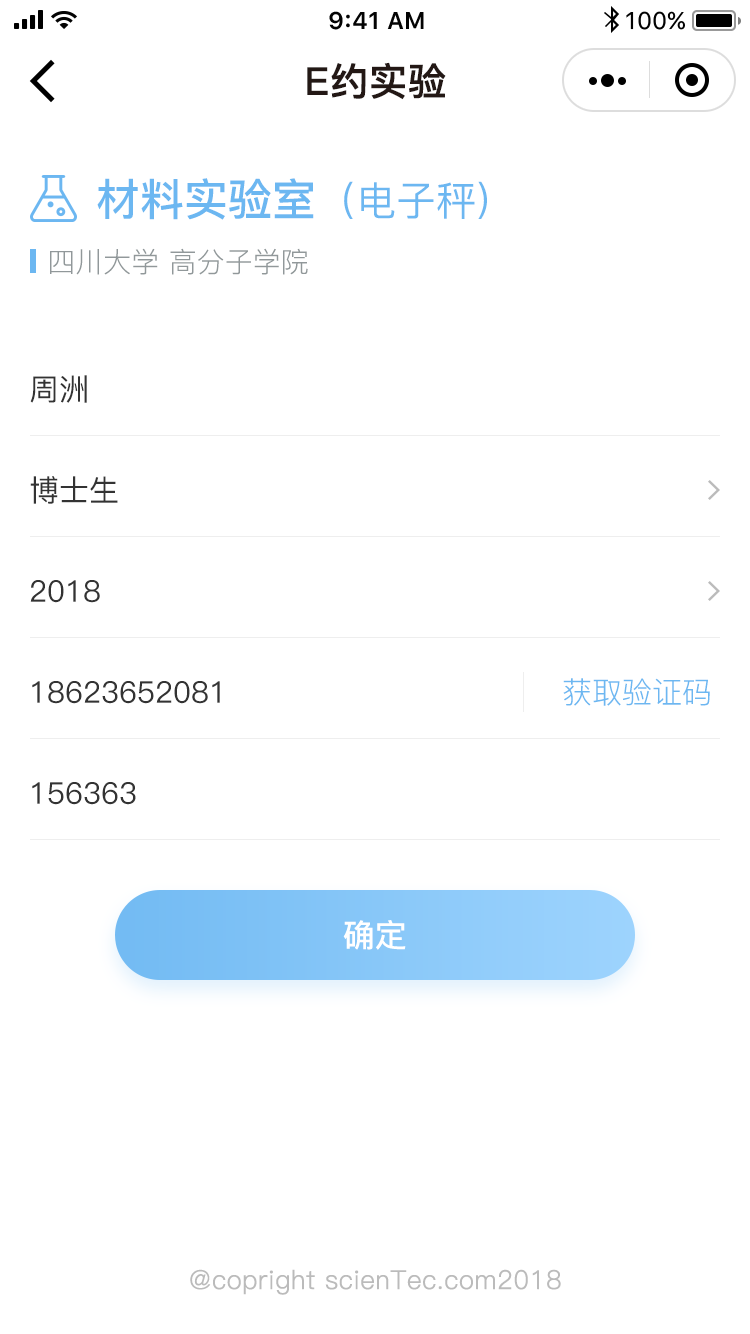
<style>
.page{position:relative;width:750px;height:1334px;background:#ffffff}
.page>*{position:absolute;margin:0}
.t1{font:38px "PingFang-SC-Bold";color:#231815;font-weight:bold}
.t2{font:44px "PingFang-SC-Bold";color:#6cb7f1}
.t3{font:40px "PingFang-SC-Medium";color:#6cb7f1}
.t4{font:28px "PingFang-SC-Regular";color:#91989a}
.t5{font:30px "PingFang-SC-Medium";color:#333333}
.t6{font:30px "PingFang-SC-Regular";color:#6cb7f1}
.t7{font:32px "PingFang-SC-Bold";color:#ffffff}
.t8{font:26px "PingFang-SC-Regular";color:#bbbbbb;font-weight:bold}
</style>
<div class="page">
<p class="t1" style="left:307px;top:62px;width:139px;height:38px">E约实验</p>
<p class="t2" style="left:97px;top:178px;width:390px;height:42px">材料实验室<span class="t3">（电子秤)</span></p>
<p class="t4" style="left:50px;top:248px;width:258px;height:27px">四川大学 高分子学院</p>
<p class="t5" style="left:30px;top:375px;width:57px;height:28px">周洲</p>
<p class="t5" style="left:30px;top:476px;width:88px;height:28px">博士生</p>
<p class="t5" style="left:30px;top:580px;width:70px;height:23px">2018</p>
<p class="t6" style="left:563px;top:678px;width:147px;height:28px">获取验证码</p>
<p class="t5" style="left:32px;top:681px;width:188px;height:23px">18623652081</p>
<p class="t5" style="left:32px;top:782px;width:104px;height:23px">156363</p>
<p class="t7" style="left:343px;top:920px;width:63px;height:30px">确定</p>
<p class="t8" style="left:190px;top:1269px;width:371px;height:26px">@copright scienTec.com2018</p>
</div>
